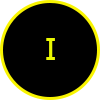
<style>
.page{position:relative;width:100px;height:100px;background:#000000}
.page>*{position:absolute;margin:0}
.t1{font:30px "Tahoma";color:#eaf802}
</style>
<div class="page">
<p class="t1" style="left:46px;top:38px;width:9px;height:22px">I</p>
</div>
